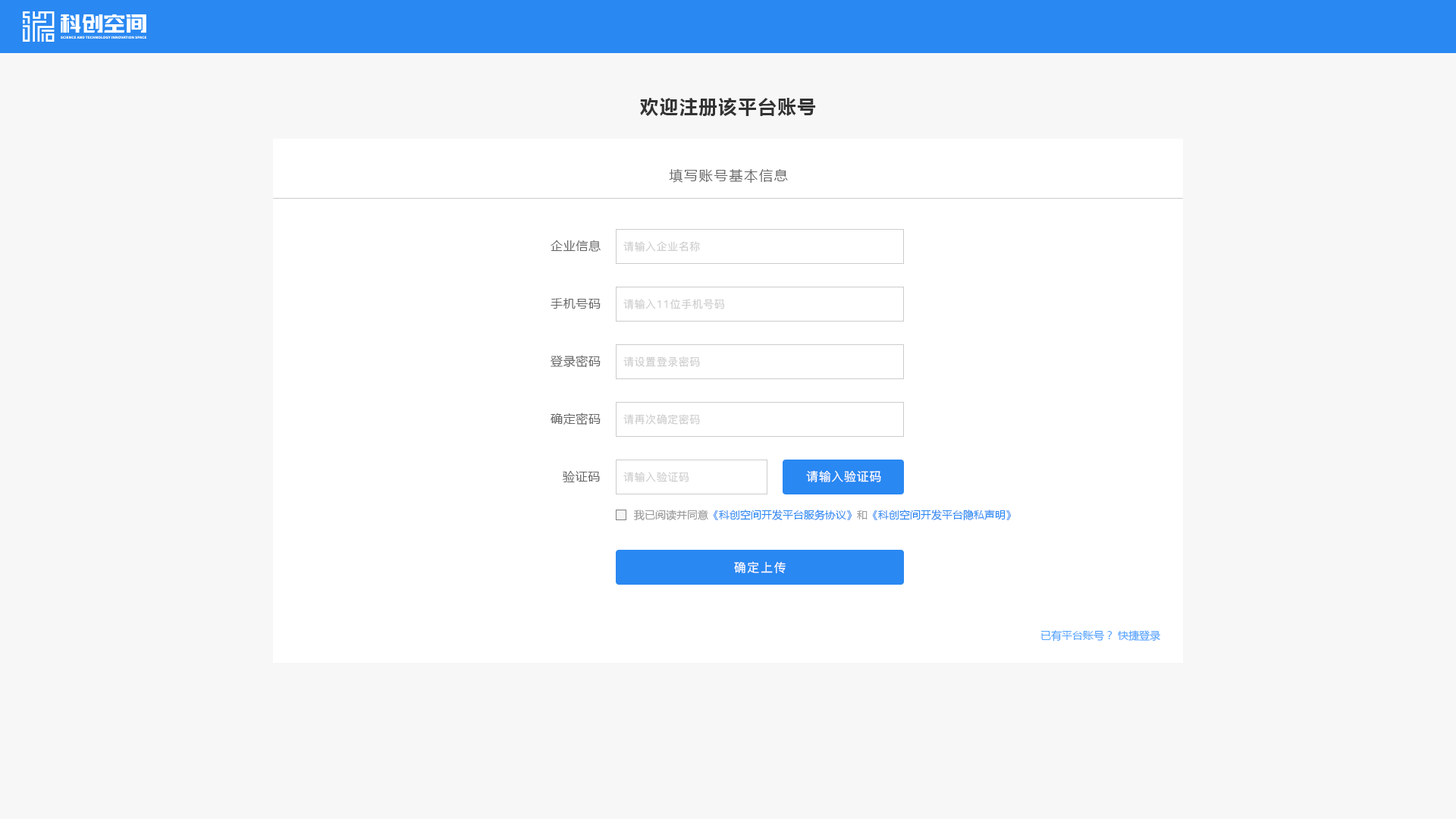
<style>
.page{position:relative;width:1456px;height:819px;background:#f7f7f7}
.page>*{position:absolute;margin:0}
.t1{font:18.2px "MicrosoftYaHei-Bold";letter-spacing:0.08em;color:#333333}
.t2{font:13.6px "MicrosoftYaHei";letter-spacing:0.1em;color:#666666}
.t3{font:12.1px "MicrosoftYaHei";letter-spacing:0.04em;color:#666666}
.t4{font:10.6px "PingFang-SC-Medium";letter-spacing:0.04em;color:#cccccc}
.t5{font:12.1px "PingFang-SC-Medium";letter-spacing:0.04em;color:#ffffff}
.t6{font:10.6px "MicrosoftYaHei";color:#2988f2}
.t7{font:10.6px "MicrosoftYaHei";color:#999999}
.t8{font:12.1px "PingFang-SC-Medium";letter-spacing:0.1em;color:#ffffff}
.t9{font:10.6px "MicrosoftYaHei";color:#51a3ff}
</style>
<div class="page">
<p class="t1" style="left:640px;top:98px;width:176px;height:18px">欢迎注册该平台账号</p>
<p class="t2" style="left:669px;top:169px;width:119px;height:14px">填写账号基本信息</p>
<p class="t3" style="left:551px;top:240px;width:50px;height:12px">企业信息</p>
<p class="t4" style="left:623px;top:241px;width:77px;height:11px">请输入企业名称</p>
<p class="t3" style="left:551px;top:298px;width:50px;height:11px">手机号码</p>
<p class="t4" style="left:623px;top:299px;width:101px;height:10px">请输入11位手机号码</p>
<p class="t3" style="left:551px;top:355px;width:50px;height:13px">登录密码</p>
<p class="t4" style="left:623px;top:356px;width:77px;height:11px">请设置登录密码</p>
<p class="t3" style="left:551px;top:413px;width:50px;height:12px">确定密码</p>
<p class="t4" style="left:623px;top:414px;width:77px;height:11px">请再次确定密码</p>
<p class="t3" style="left:563px;top:471px;width:37px;height:11px">验证码</p>
<p class="t4" style="left:623px;top:472px;width:66px;height:10px">请输入验证码</p>
<p class="t5" style="left:806px;top:470px;width:75px;height:12px">请输入验证码</p>
<p class="t6" style="left:634px;top:510px;width:378px;height:11px"><span class="t7">我已阅读并同意</span>《科创空间开发平台服务协议》<span class="t7">和</span>《科创空间开发平台隐私声明》</p>
<p class="t8" style="left:734px;top:561px;width:52px;height:12px">确定上传</p>
<p class="t9" style="left:1041px;top:630px;width:119px;height:12px">已有平台账号？ 快捷登录</p>
</div>
